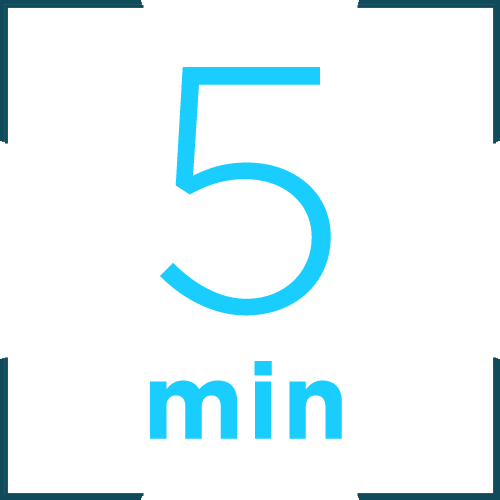
<style>
.page{position:relative;width:500px;height:500px;background:#ffffff}
.page>*{position:absolute;margin:0}
.t1{font:106.3px "Gotham-Bold";letter-spacing:0.03em;color:#19ceff}
.t2{font:348.5px "Gotham-Light";letter-spacing:0.03em;color:#19ceff}
</style>
<div class="page">
<p class="t1" style="left:150px;top:67px;width:192px;height:372px;text-align:center"><span class="t2">5<br></span>min</p>
</div>
